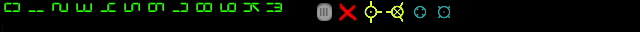
<style>
.page{position:relative;width:640px;height:32px;background:#000000}
.page>*{position:absolute;margin:0}
.t1{font:24px "Digital-7Mono";letter-spacing:0.05em;color:#24ff00}
</style>
<div class="page">
<p class="t1" style="left:4px;top:2px;width:17px;height:11px;rotate:90deg">0</p>
<p class="t1" style="left:52px;top:2px;width:17px;height:11px;rotate:90deg">2</p>
<p class="t1" style="left:76px;top:3px;width:17px;height:10px;rotate:90deg">3</p>
<p class="t1" style="left:100px;top:2px;width:16px;height:11px;rotate:90deg">4</p>
<p class="t1" style="left:124px;top:2px;width:17px;height:11px;rotate:90deg">5</p>
<p class="t1" style="left:148px;top:2px;width:17px;height:11px;rotate:90deg">6</p>
<p class="t1" style="left:172px;top:2px;width:17px;height:11px;rotate:90deg">7</p>
<p class="t1" style="left:196px;top:2px;width:17px;height:11px;rotate:90deg">8</p>
<p class="t1" style="left:220px;top:2px;width:17px;height:11px;rotate:90deg">9</p>
<p class="t1" style="left:243px;top:2px;width:17px;height:11px;rotate:90deg">k</p>
<p class="t1" style="left:266px;top:2px;width:17px;height:11px;rotate:90deg">m</p>
<p class="t1" style="left:28px;top:10px;width:16px;height:3px;rotate:90deg">1</p>
</div>
